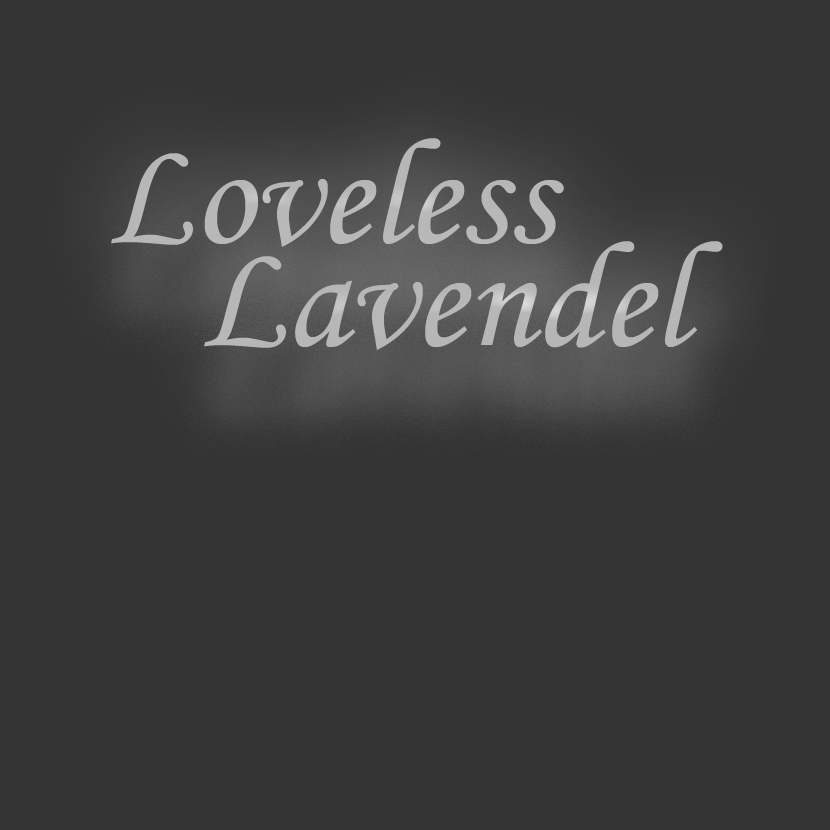
<style>
.page{position:relative;width:830px;height:830px;background:#333333}
.page>*{position:absolute;margin:0}
.t1{font:150.6px "NK_MonotypeCorsiva";color:#b8b8b8}
.t2{font:150.6px "NK_MonotypeCorsiva";color:#b7b7b7}
</style>
<div class="page">
<p class="t1" style="left:111px;top:138px;width:453px;height:109px">Loveless</p>
<p class="t2" style="left:204px;top:241px;width:519px;height:109px">Lavendel</p>
</div>
